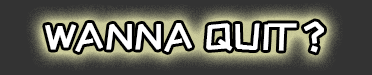
<style>
.page{position:relative;width:372px;height:75px;background:#333333}
.page>*{position:absolute;margin:0}
.t1{font:37px "ZCOOLKuaiLe-Regular";color:#ffffff;font-weight:bold}
</style>
<div class="page">
<p class="t1" style="left:45px;top:21px;width:279px;height:32px">WANNA QUIT ?</p>
</div>
